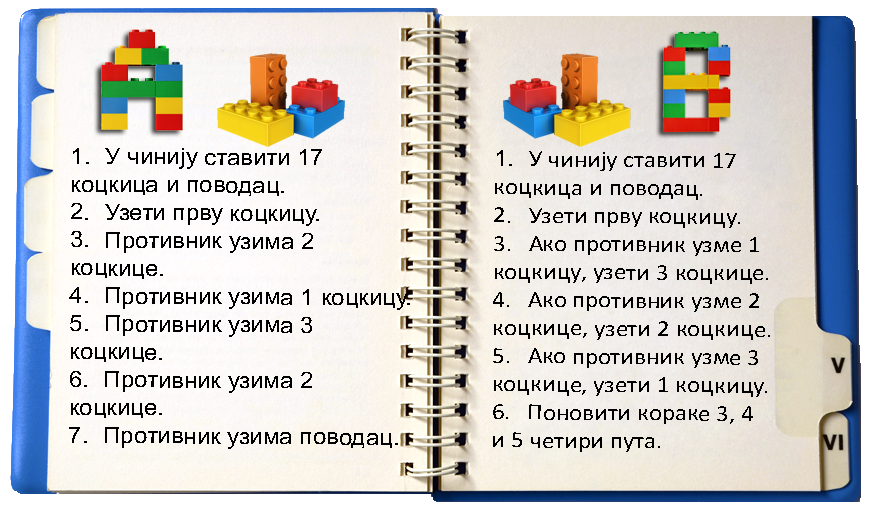
<style>
.page{position:relative;width:873px;height:509px}
.page>*{position:absolute;margin:0}
.t1{font:23.3px "ArialMT";color:#000000;scale:1.03 1}
.t2{font:23.4px "Calibri";color:#000000;scale:1.06 1}
.t3{font:23.4px "ArialMT";color:#000000;scale:1.06 1}
</style>
<div class="page">
<p class="t1" style="left:69px;top:148px;width:341px;height:301px">1. У чинију ставити 17 коцкица и поводац.<br>2. Узети прву коцкицу.<br>3. Противник узима 2 коцкице.<br>4. Противник узима 1 коцкицу.<br>5. Противник узима 3 коцкице.<br>6. Противник узима 2 коцкице.<br>7. Противник узима поводац.</p>
<p class="t2" style="left:493px;top:150px;width:277px;height:302px"><span class="t3">1.</span> У чинију ставити 17 коцкица и поводац.<br>2. Узети прву коцкицу.<br>3. Ако противник узме 1 коцкицу, узети 3 коцкице.<br>4. Ако противник узме 2 коцкице, узети 2 коцкице.<br>5. Ако противник узме 3 коцкице, узети 1 коцкицу.<br>6. Поновити кораке 3, 4 <br>и 5 четири пута.</p>
</div>
